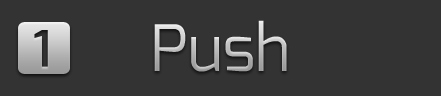
<style>
.page{position:relative;width:441px;height:96px;background:#333333}
.page>*{position:absolute;margin:0}
.t1{font:64px "Exo-Regular"}
</style>
<div class="page">
<p class="t1" style="left:154px;top:20px;width:133px;height:52px">Push</p>
</div>
